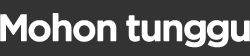
<style>
.page{position:relative;width:250px;height:56px;background:#333333}
.page>*{position:absolute;margin:0}
.t1{font:37px "iCielGotham-Medium";letter-spacing:-0.06em;color:#ffffff;font-weight:bold}
</style>
<div class="page">
<p class="t1" style="left:0px;top:13px;width:250px;height:35px">Mohon tunggu</p>
</div>
